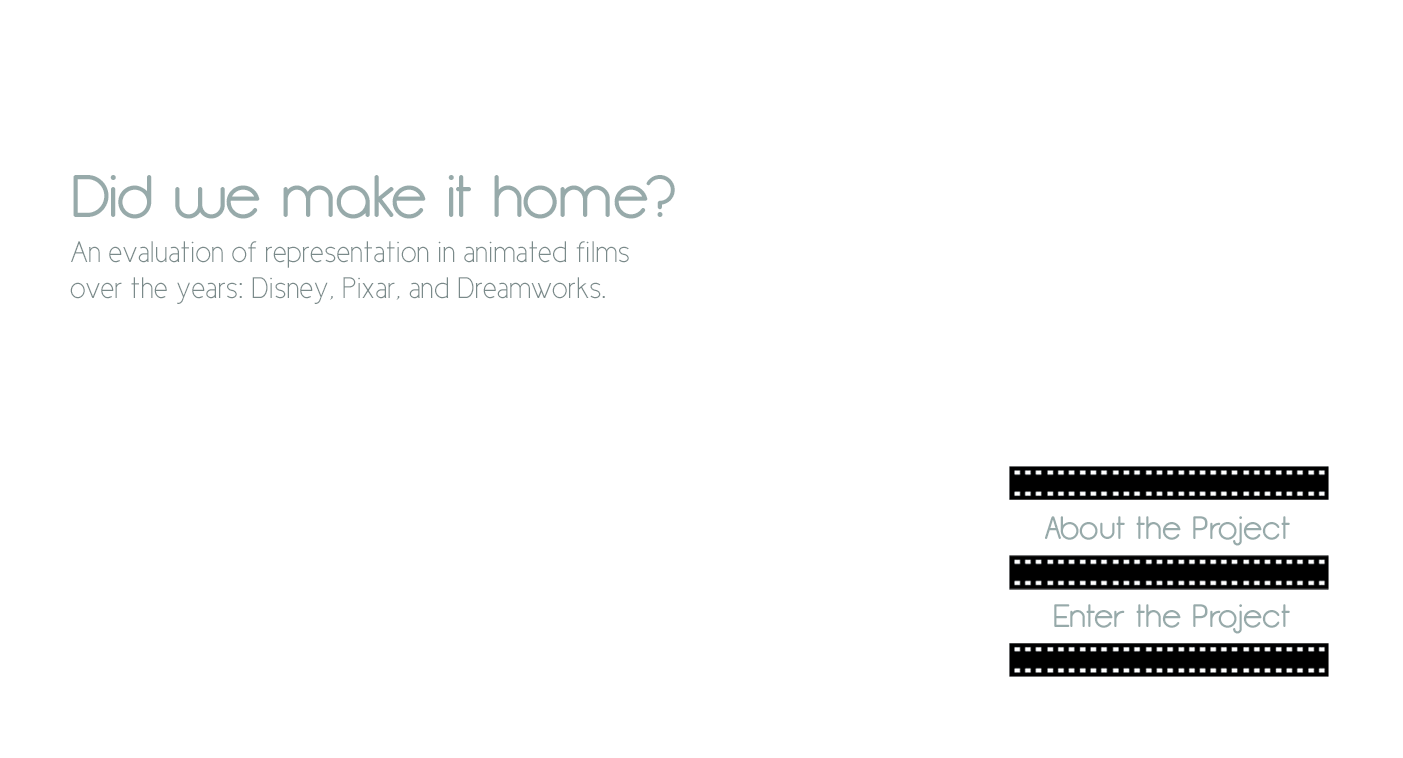
<style>
.page{position:relative;width:1403px;height:758px;background:#ffffff}
.page>*{position:absolute;margin:0}
.t1{font:60px "Opificio-Rounded";color:#97aaaa}
.t2{font:30px "CicleFina";color:#7a8a8a}
.t3{font:32.5px "Opificio-Rounded";color:#97aaaa}
</style>
<div class="page">
<p class="t1" style="left:73px;top:175px;width:602px;height:44px">Did we make it home?</p>
<p class="t2" style="left:70px;top:241px;width:559px;height:63px">An evaluation of representation in animated films<br>over the years: Disney, Pixar, and Dreamworks.</p>
<p class="t3" style="left:1045px;top:516px;width:245px;height:30px">About the Project</p>
<p class="t3" style="left:1054px;top:604px;width:236px;height:30px">Enter the Project</p>
</div>
